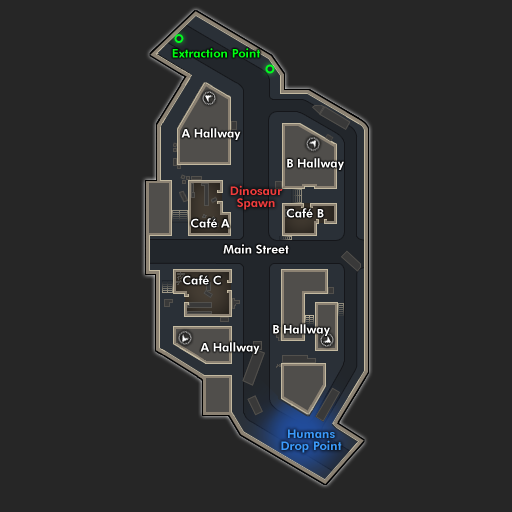
<style>
.page{position:relative;width:512px;height:512px;background:#262626}
.page>*{position:absolute;margin:0}
.t1{font:12px "FuturaBT-Heavy";color:#00ff12}
.t2{font:12px "FuturaBT-Heavy";color:#ffffff}
.t3{font:12px/12px "FuturaBT-Heavy";color:#f03c3c}
.t4{font:12px/12px "FuturaBT-Heavy";color:#3b9afb}
</style>
<div class="page">
<p class="t1" style="left:172px;top:48px;width:88px;height:10px">Extraction Point</p>
<p class="t2" style="left:181px;top:128px;width:60px;height:12px">A Hallway</p>
<p class="t2" style="left:287px;top:158px;width:57px;height:12px">B Hallway</p>
<p class="t3" style="left:230px;top:185px;width:53px;height:25px;text-align:center">Dinosaur<br>Spawn</p>
<p class="t2" style="left:286px;top:208px;width:38px;height:10px">Café B</p>
<p class="t2" style="left:191px;top:218px;width:39px;height:10px">Café A</p>
<p class="t2" style="left:223px;top:244px;width:66px;height:10px">Main Street</p>
<p class="t2" style="left:183px;top:275px;width:38px;height:10px">Café C</p>
<p class="t2" style="left:273px;top:324px;width:57px;height:12px">B Hallway</p>
<p class="t2" style="left:200px;top:342px;width:60px;height:12px">A Hallway</p>
<p class="t4" style="left:281px;top:429px;width:61px;height:24px;text-align:center">Humans<br>Drop Point</p>
</div>
